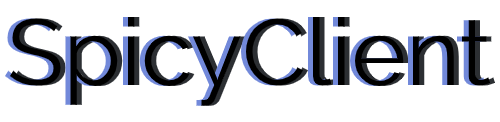
<style>
.page{position:relative;width:500px;height:122px;background:#ffffff}
.page>*{position:absolute;margin:0}
.t1{font:93px "Raleway-Regular"}
.t2{font:93px "Raleway-Regular";color:#000000}
</style>
<div class="page">
<p class="t1" style="left:5px;top:17px;width:480px;height:89px">SpicyClient</p>
<p class="t2" style="left:10px;top:17px;width:480px;height:89px">SpicyClient</p>
<p class="t1" style="left:15px;top:17px;width:480px;height:89px">SpicyClient</p>
</div>
